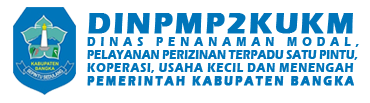
<style>
.page{position:relative;width:370px;height:103px;background:#ffffff}
.page>*{position:absolute;margin:0}
.t1{font:12.8px/13px "ErasITC-Bold";letter-spacing:-0.01em;color:#0075ba;text-transform:uppercase;scale:0.87 1}
.t2{font:30px/20px "ErasITC-Bold";letter-spacing:0.05em;color:#0075ba;text-transform:uppercase;font-weight:bold}
.t3{font:12.8px/13px "ErasITC-Bold";letter-spacing:0.44em;color:#0075ba;text-transform:uppercase;scale:0.87 1}
.t4{font:12.8px/13px "ErasITC-Bold";letter-spacing:0.08em;color:#0075ba;text-transform:uppercase;scale:0.87 1}
.t5{font:12.8px/13px "ErasITC-Bold";letter-spacing:0.055em;color:#0075ba;text-transform:uppercase;scale:0.87 1}
.t6{font:12.8px/13px "ErasITC-Bold";letter-spacing:0.17em;color:#0075ba;text-transform:uppercase;font-weight:bold;scale:0.87 1}
</style>
<div class="page">
<p class="t1" style="left:87px;top:13px;width:272px;height:73px"><span class="t2">dinpmp2kukm<br></span><span class="t3">Dinas Penanaman Modal</span><span class="t4">,<br></span>Pelayanan Perizinan Terpadu Satu Pintu,<br><span class="t5">Koperasi, Usaha Kecil dan Menengah<br></span><span class="t6">Pemerintah Kabupaten Bangka</span></p>
</div>
